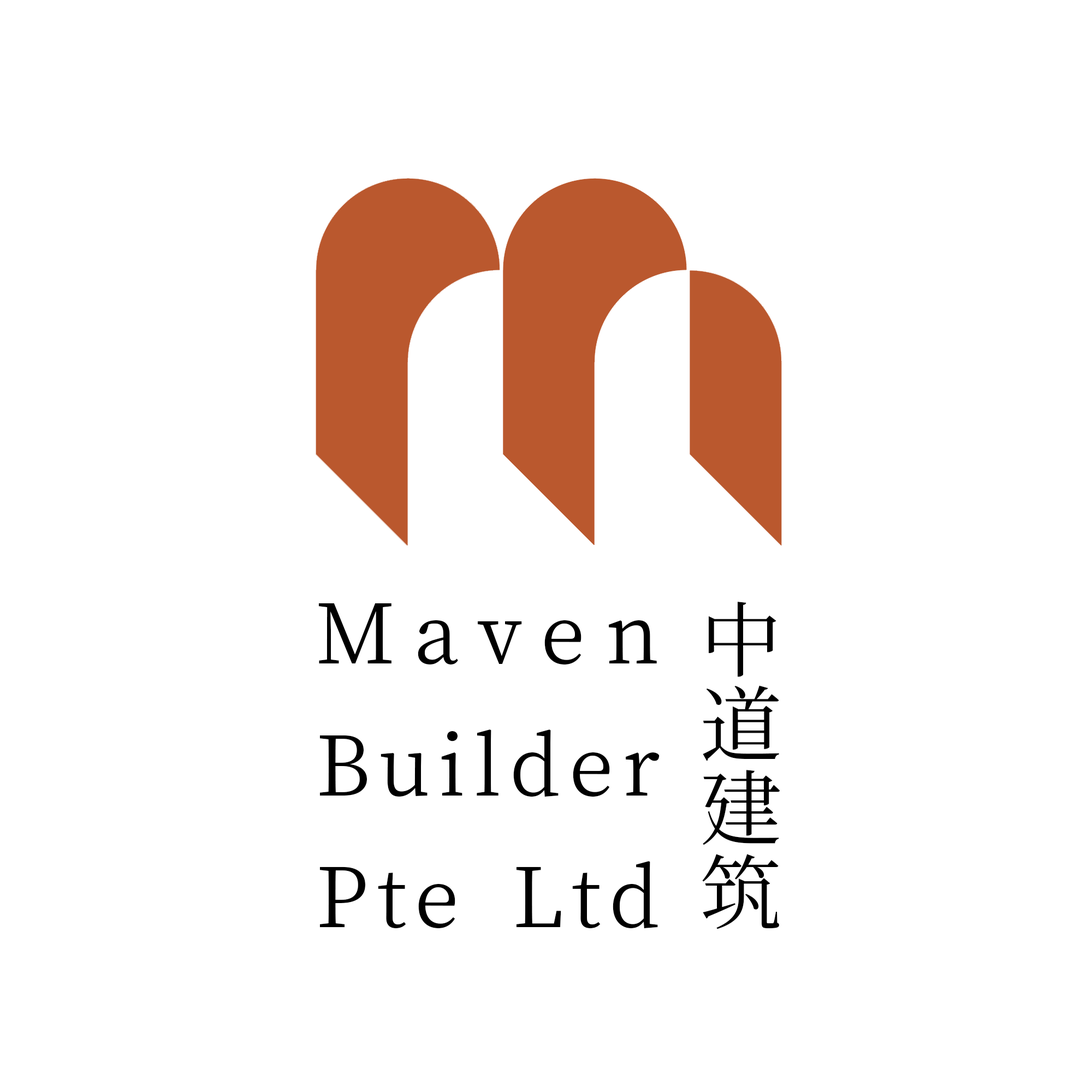
<style>
.page{position:relative;width:1092px;height:1092px;background:#ffffff}
.page>*{position:absolute;margin:0}
.t1{font:81.9px/131.9px "NotoSerifJP-Regular";letter-spacing:0.1em;color:#000000}
.t2{font:81.9px/84.2px "NotoSerifJP-Regular";letter-spacing:0.2em;color:#000000}
</style>
<div class="page">
<p class="t1" style="left:318px;top:603px;width:342px;height:326px;text-align:justify">Maven <br>Builder<br>Pte Ltd</p>
<p class="t2" style="left:702px;top:602px;width:78px;height:327px;text-align:right">中<br>道<br>建<br>筑</p>
</div>
